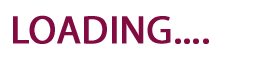
<style>
.page{position:relative;width:256px;height:64px;background:#ffffff}
.page>*{position:absolute;margin:0}
.t1{font:39.6px "MyriadPro-Regular";color:#820c41;font-weight:bold}
</style>
<div class="page">
<p class="t1" style="left:13px;top:15px;width:196px;height:29px">LOADING....</p>
</div>
